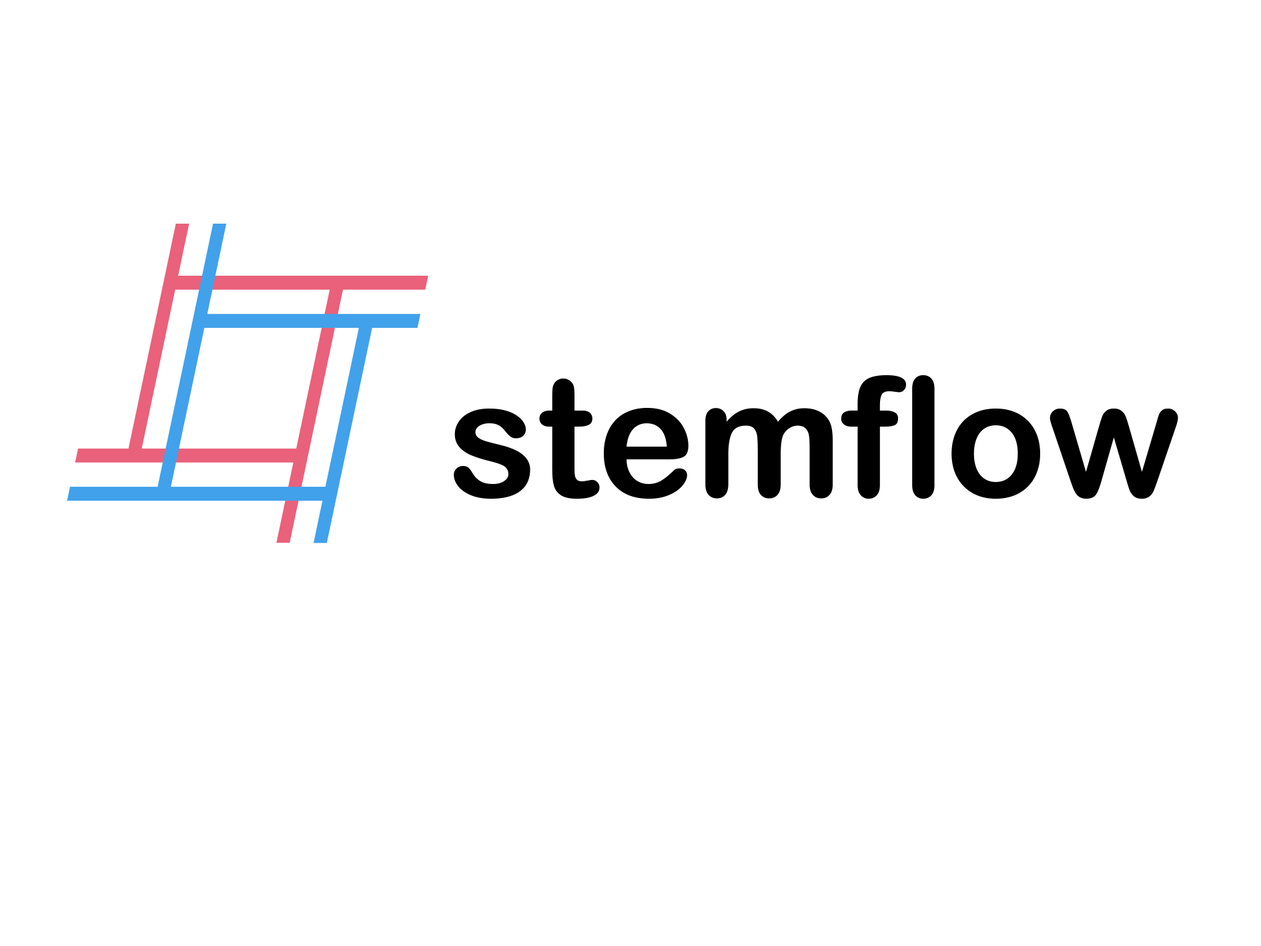
<style>
.page{position:relative;width:1261px;height:946px;background:#ffffff}
.page>*{position:absolute;margin:0}
.t1{font:166.8px "ArialRoundedMTBold";color:#000000}
</style>
<div class="page">
<p class="t1" style="left:454px;top:375px;width:724px;height:123px">stemflow</p>
</div>
